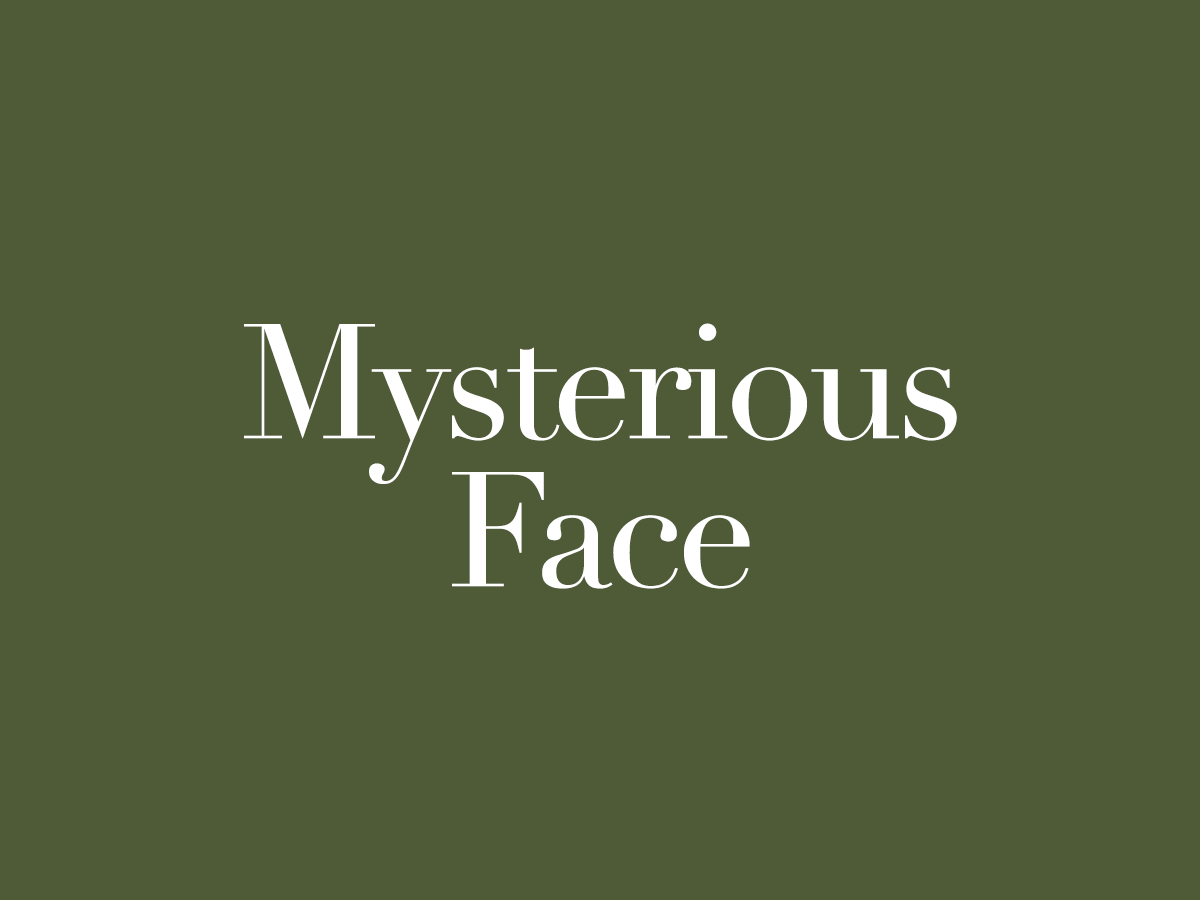
<style>
.page{position:relative;width:1200px;height:900px;background:#4f5b37}
.page>*{position:absolute;margin:0}
.t1{font:160px/148px "Didot";letter-spacing:-0.04em;color:#ffffff}
</style>
<div class="page">
<p class="t1" style="left:244px;top:323px;width:713px;height:266px;text-align:center">Mysterious<br>Face</p>
</div>
